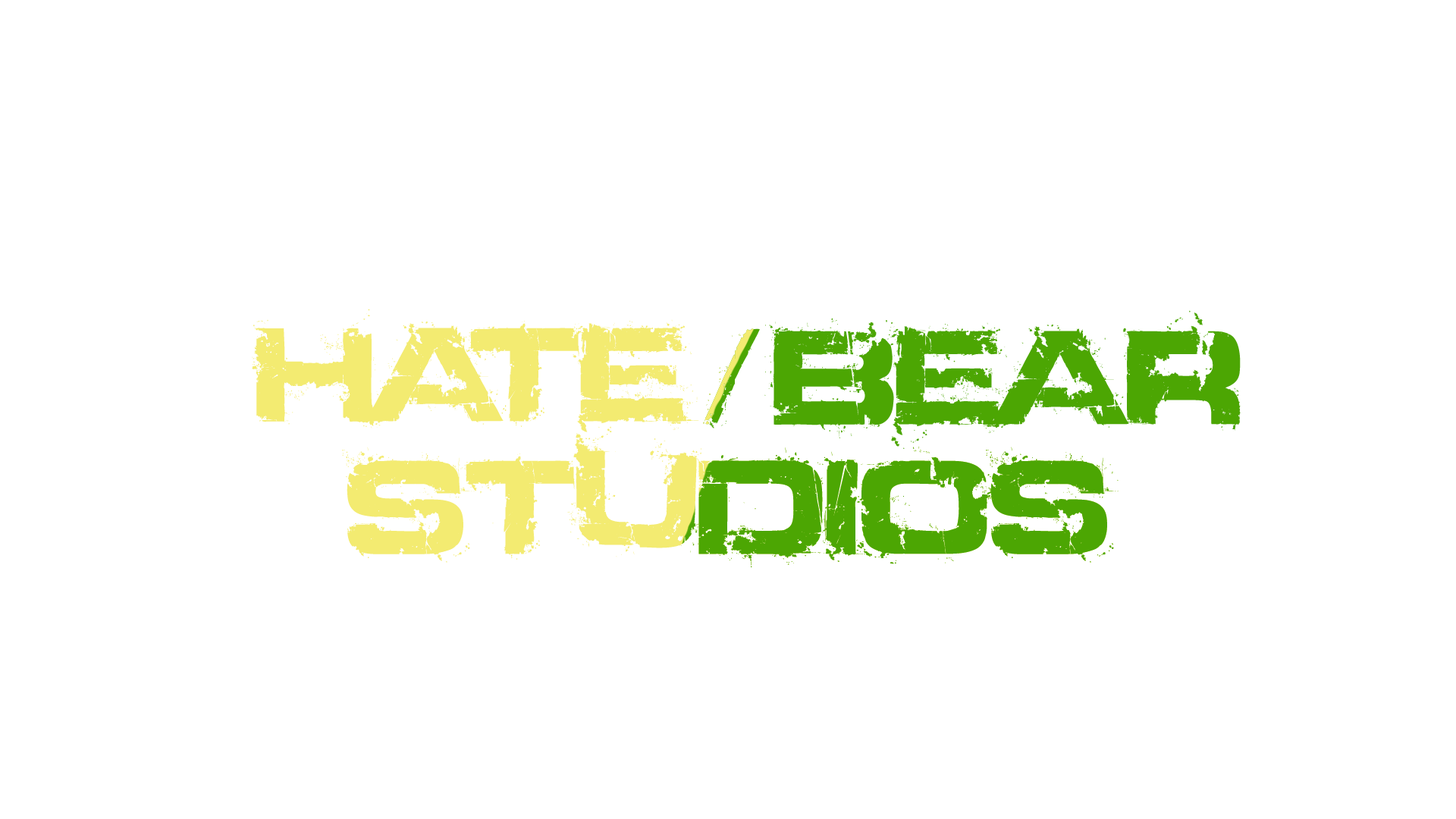
<style>
.page{position:relative;width:1456px;height:819px;background:#ffffff}
.page>*{position:absolute;margin:0}
.t1{font:136.5px "Defused-ExtendedBold";color:#f3eb71}
.t2{font:136.5px "Defused-ExtendedBold";color:#4ca603}
.t3{font:136.5px "Defused-ExtendedBold"}
</style>
<div class="page">
<p class="t1" style="left:252px;top:309px;width:447px;height:137px">HATE</p>
<p class="t2" style="left:764px;top:310px;width:477px;height:139px">BEAR</p>
<p class="t3" style="left:703px;top:328px;width:57px;height:100px">/</p>
<p class="t3" style="left:342px;top:438px;width:777px;height:129px">STUDIOS</p>
</div>
